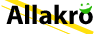
<style>
.page{position:relative;width:95px;height:34px;background:#ffffff}
.page>*{position:absolute;margin:0}
.t1{font:27.2px "MyriadPro-Bold";color:#000000}
</style>
<div class="page">
<p class="t1" style="left:6px;top:4px;width:87px;height:21px">Allakro</p>
</div>
